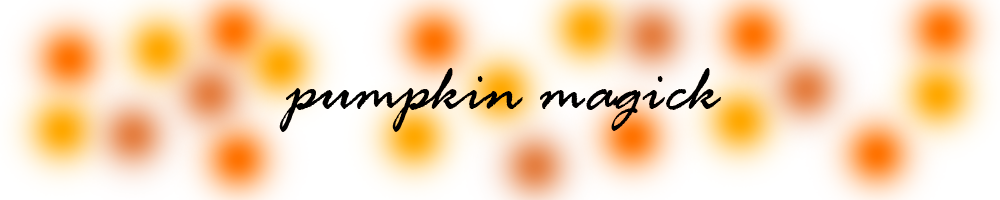
<style>
.page{position:relative;width:1000px;height:200px}
.page>*{position:absolute;margin:0}
.t1{font:72px "RageItalic";color:#000000}
</style>
<div class="page">
<p class="t1" style="left:279px;top:68px;width:442px;height:64px">pumpkin magick</p>
</div>
